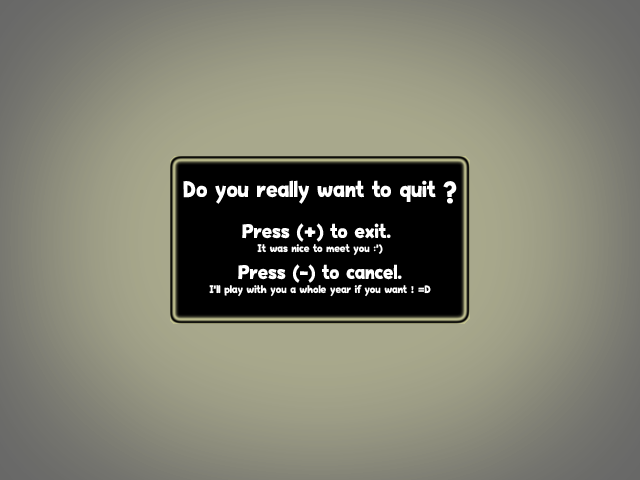
<style>
.page{position:relative;width:640px;height:480px}
.page>*{position:absolute;margin:0}
.t1{font:12px "HappyHell";color:#ffffff}
.t2{font:25px "HappyHell";color:#ffffff}
.t3{font:22px "HappyHell";color:#ffffff}
</style>
<div class="page">
<p class="t1" style="left:183px;top:180px;width:274px;height:117px;text-align:center"><span class="t2">Do you really want to quit ?<br><br></span><span class="t3">Press (+) to exit. <br></span>It was nice to meet you :')<br><span class="t3">Press (-) to cancel.<br></span>I'll play with you a whole year if you want ! =D</p>
</div>
